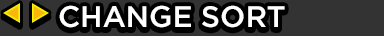
<style>
.page{position:relative;width:384px;height:36px;background:#333333}
.page>*{position:absolute;margin:0}
.t1{font:29.6px "Gotham-Medium";color:#ffffff}
</style>
<div class="page">
<p class="t1" style="left:59px;top:5px;width:226px;height:23px">CHANGE SORT</p>
</div>
